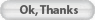
<style>
.page{position:relative;width:95px;height:20px}
.page>*{position:absolute;margin:0}
.t1{font:12px "MyriadPro-Bold";color:#575757}
</style>
<div class="page">
<p class="t1" style="left:19px;top:5px;width:59px;height:11px">Ok, Thanks</p>
</div>
